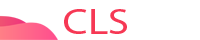
<style>
.page{position:relative;width:200px;height:40px;background:#ffffff}
.page>*{position:absolute;margin:0}
.t1{font:36px "MyriadPro-Regular";letter-spacing:0.005em;color:#f63854;scale:1.2 1}
</style>
<div class="page">
<p class="t1" style="left:64px;top:9px;width:63px;height:25px">CLS</p>
</div>
